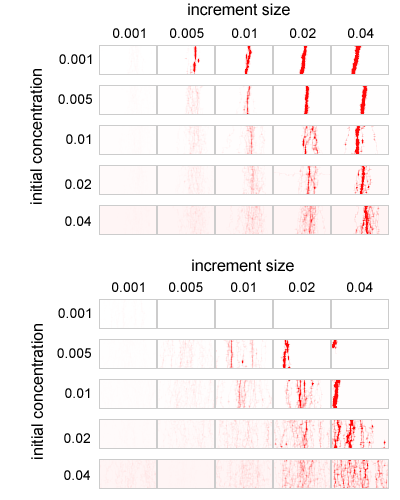
<style>
.page{position:relative;width:400px;height:500px;background:#ffffff}
.page>*{position:absolute;margin:0}
.t1{font:16px "ArialMT";color:#000000}
.t2{font:14px "ArialMT";color:#000000}
</style>
<div class="page">
<p class="t1" style="left:188px;top:3px;width:102px;height:13px">increment size</p>
<p class="t2" style="left:113px;top:28px;width:32px;height:10px">0.001</p>
<p class="t2" style="left:170px;top:28px;width:34px;height:10px">0.005</p>
<p class="t2" style="left:232px;top:28px;width:24px;height:10px">0.01</p>
<p class="t2" style="left:290px;top:28px;width:26px;height:10px">0.02</p>
<p class="t2" style="left:348px;top:28px;width:26px;height:10px">0.04</p>
<p class="t2" style="left:59px;top:54px;width:33px;height:10px">0.001</p>
<p class="t1" style="left:30px;top:69px;width:12px;height:135px;rotate:-90deg">initial concentration</p>
<p class="t2" style="left:58px;top:94px;width:34px;height:10px">0.005</p>
<p class="t2" style="left:66px;top:134px;width:25px;height:10px">0.01</p>
<p class="t2" style="left:65px;top:179px;width:26px;height:10px">0.02</p>
<p class="t2" style="left:65px;top:216px;width:26px;height:10px">0.04</p>
<p class="t1" style="left:192px;top:259px;width:102px;height:13px">increment size</p>
<p class="t2" style="left:112px;top:282px;width:32px;height:10px">0.001</p>
<p class="t2" style="left:169px;top:282px;width:34px;height:10px">0.005</p>
<p class="t2" style="left:231px;top:282px;width:24px;height:10px">0.01</p>
<p class="t2" style="left:289px;top:282px;width:26px;height:10px">0.02</p>
<p class="t2" style="left:347px;top:282px;width:26px;height:10px">0.04</p>
<p class="t2" style="left:58px;top:308px;width:33px;height:10px">0.001</p>
<p class="t1" style="left:31px;top:324px;width:12px;height:135px;rotate:-90deg">initial concentration</p>
<p class="t2" style="left:57px;top:348px;width:34px;height:10px">0.005</p>
<p class="t2" style="left:65px;top:388px;width:25px;height:10px">0.01</p>
<p class="t2" style="left:64px;top:433px;width:26px;height:10px">0.02</p>
<p class="t2" style="left:64px;top:470px;width:26px;height:10px">0.04</p>
</div>
